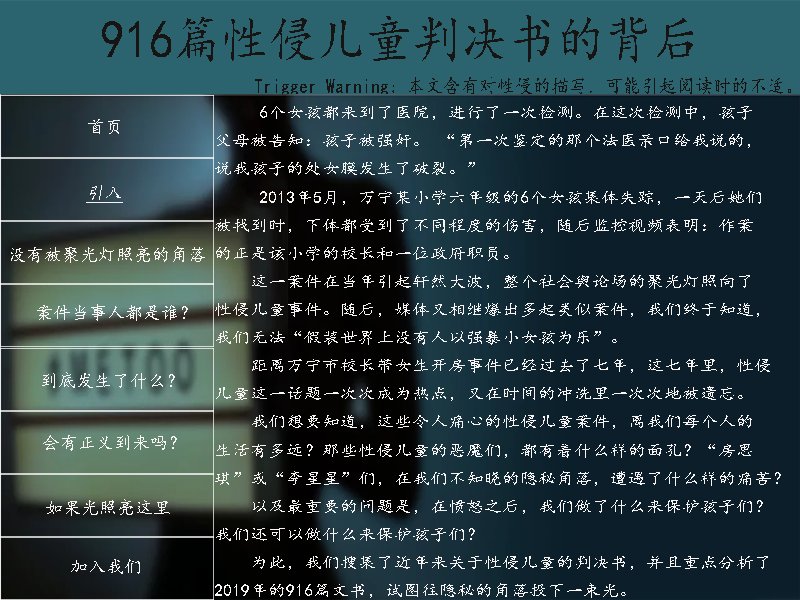
<style>
.page{position:relative;width:800px;height:600px;background:#0b1e2a}
.page>*{position:absolute;margin:0}
.t1{font:53.3px "¿¬Ìå";color:#171414;scale:0.9 1}
.t2{font:20px "¿¬Ìå";color:#171414;scale:0.9 1}
.t3{font:16.1px "¿¬Ìå";color:#f9f5f5;scale:1.12 1}
.t4{font:18px "¿¬Ìå";color:#f9f5f5}
.t5{font:18px "¿¬Ìå";color:#f9f5f5;font-style:italic;text-decoration:underline}
</style>
<div class="page">
<p class="t1" style="left:102px;top:15px;width:591px;height:48px">916篇性侵儿童判决书的背后</p>
<p class="t2" style="left:255px;top:77px;width:536px;height:19px">Trigger Warning：本文含有对性侵的描写，可能引起阅读时的不适。</p>
<p class="t3" style="left:215px;top:106px;width:566px;height:492px">6个女孩都来到了医院，进行了一次检测。在这次检测中，孩子<br>父母被告知：孩子被强奸。 “第一次鉴定的那个法医亲口给我说的，<br>说我孩子的处女膜发生了破裂。”<br>     ​2013年5月，万宁某小学六年级的6个女孩集体失踪，一天后她们<br>被找到时，下体都受到了不同程度的伤害，随后监控视频表明：作案<br>的正是该小学的校长和一位政府职员。<br>    这一案件在当年引起轩然大波，整个社会舆论场的聚光灯照向了<br>性侵儿童事件。随后，媒体又相继爆出多起类似案件，我们终于知道，<br>我们无法“假装世界上没有人以强暴小女孩为乐”。<br>    距离万宁市校长带女生开房事件已经过去了七年，这七年里，性侵<br>儿童这一话题一次次成为热点，又在时间的冲洗里一次次地被遗忘。<br>    我们想要知道，这些令人痛心的性侵儿童案件，离我们每个人的<br>生活有多远？那些性侵儿童的恶魔们，都有着什么样的面孔？“房思<br>琪”或“李星星”们，在我们不知晓的隐秘角落，遭遇了什么样的痛苦？<br>    以及最重要的问题是，在愤怒之后，我们做了什么来保护孩子们？<br>我们还可以做什么来保护孩子们？  <br>    为此，我们搜集了近年来关于性侵儿童的判决书，并且重点分析了<br>2019年的916篇文书，试图往隐秘的角落投下一束光。</p>
<p class="t4" style="left:88px;top:119px;width:32px;height:15px">首页</p>
<p class="t5" style="left:86px;top:185px;width:37px;height:18px">引入</p>
<p class="t4" style="left:11px;top:246px;width:194px;height:17px">没有被聚光灯照亮的角落</p>
<p class="t4" style="left:37px;top:304px;width:151px;height:17px">案件当事人都是谁？</p>
<p class="t4" style="left:42px;top:372px;width:133px;height:17px">到底发生了什么？</p>
<p class="t4" style="left:43px;top:435px;width:134px;height:16px">会有正义到来吗？</p>
<p class="t4" style="left:46px;top:499px;width:124px;height:17px">如果光照亮这里</p>
<p class="t4" style="left:71px;top:559px;width:69px;height:15px">加入我们</p>
</div>
